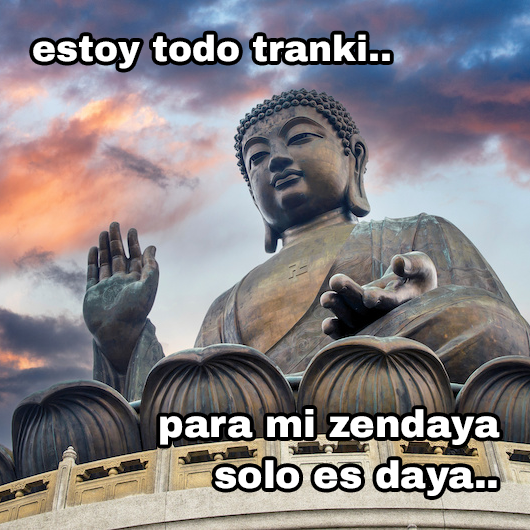
<style>
.page{position:relative;width:530px;height:530px}
.page>*{position:absolute;margin:0}
.t1{font:36px "ArchivoBlack-Regular";color:#ffffff}
.t2{font:38.1px "ArchivoBlack-Regular";color:#ffffff}
</style>
<div class="page">
<p class="t1" style="left:33px;top:34px;width:357px;height:35px">estoy todo tranki..</p>
<p class="t2" style="left:160px;top:409px;width:340px;height:87px;text-align:right">para mi zendaya<br>solo es daya..</p>
</div>
